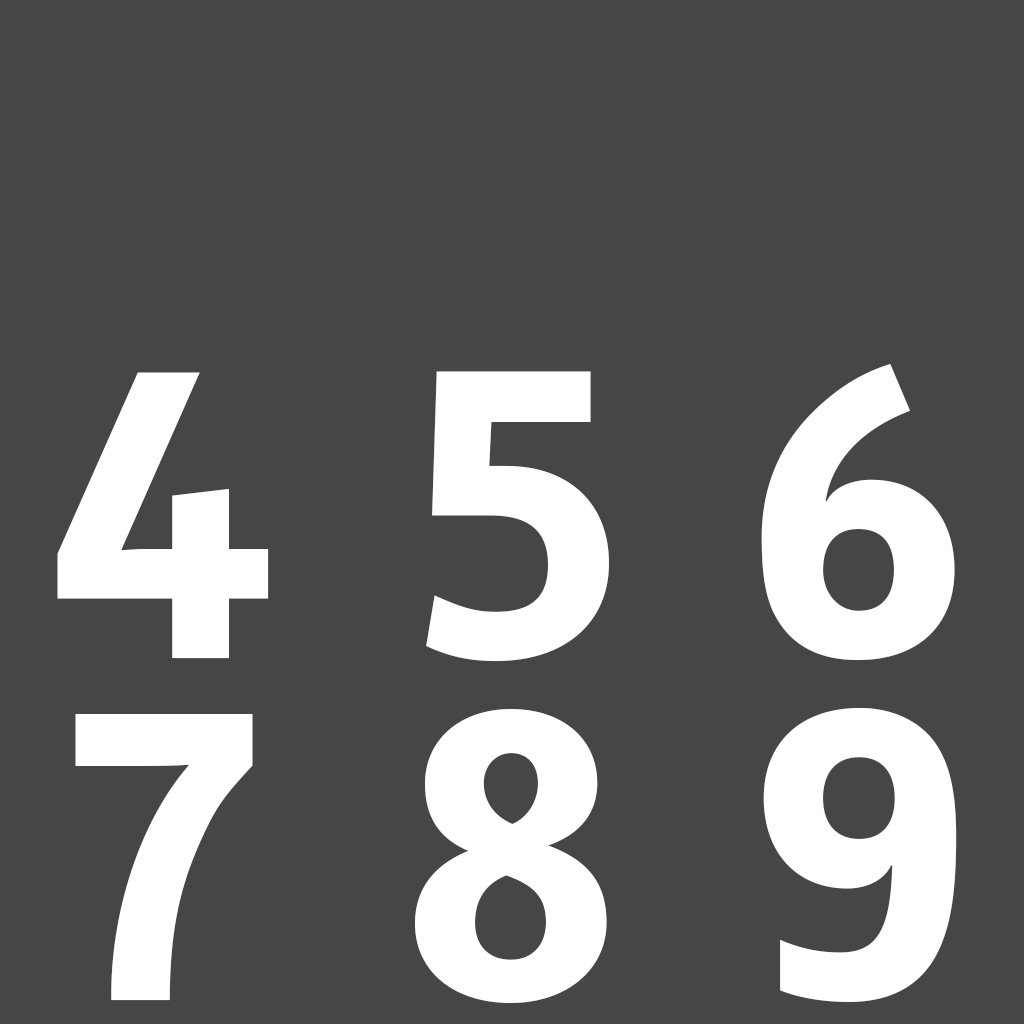
<style>
.page{position:relative;width:1024px;height:1024px;background:#464646}
.page>*{position:absolute;margin:0}
.t1{font:420px "SemikolonPlus-Bold";color:#ffffff}
</style>
<div class="page">
<p class="t1" style="left:761px;top:363px;width:194px;height:298px">6</p>
<p class="t1" style="left:57px;top:372px;width:212px;height:287px">4</p>
<p class="t1" style="left:426px;top:371px;width:183px;height:291px">5</p>
<p class="t1" style="left:415px;top:709px;width:192px;height:294px">8</p>
<p class="t1" style="left:763px;top:707px;width:194px;height:295px">9</p>
<p class="t1" style="left:75px;top:714px;width:178px;height:287px">7</p>
</div>
